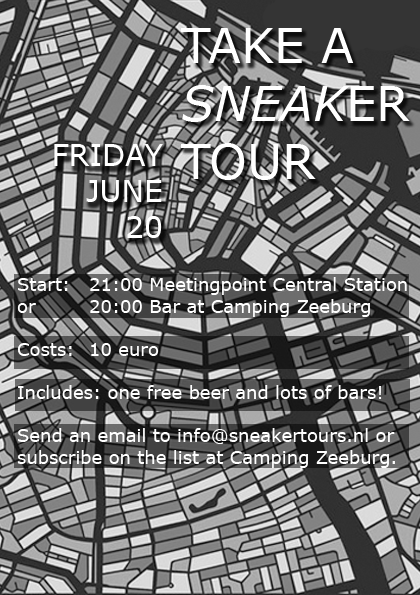
<style>
.page{position:relative;width:420px;height:595px}
.page>*{position:absolute;margin:0}
.t1{font:48px "Verdana";color:#ffffff}
.t2{font:48px "Verdana-Italic";color:#ffffff}
.t3{font:30px "Verdana";color:#ffffff}
.t4{font:18px "Verdana";color:#ffffff}
</style>
<div class="page">
<p class="t1" style="left:181px;top:28px;width:229px;height:152px">TAKE A<br><span class="t2">SNEAK</span>ER <br>TOUR</p>
<p class="t3" style="left:54px;top:144px;width:109px;height:94px;text-align:right">FRIDAY<br>JUNE<br>20</p>
<p class="t4" style="left:17px;top:277px;width:390px;height:191px">Start: 21:00 Meetingpoint Central Station<br>or  20:00 Bar at Camping Zeeburg <br><br>Costs: 10 euro<br><br>Includes: one free beer and lots of bars!<br><br>Send an email to info@sneakertours.nl or <br>subscribe on the list at Camping Zeeburg.</p>
</div>
